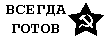
<style>
.page{position:relative;width:112px;height:38px;background:#ffffff}
.page>*{position:absolute;margin:0}
.t1{font:16px "CourierNewPS-BoldMT";color:#000000}
</style>
<div class="page">
<p class="t1" style="left:6px;top:5px;width:60px;height:28px;text-align:center">ВСЕГДА<br>ГОТОВ</p>
</div>
